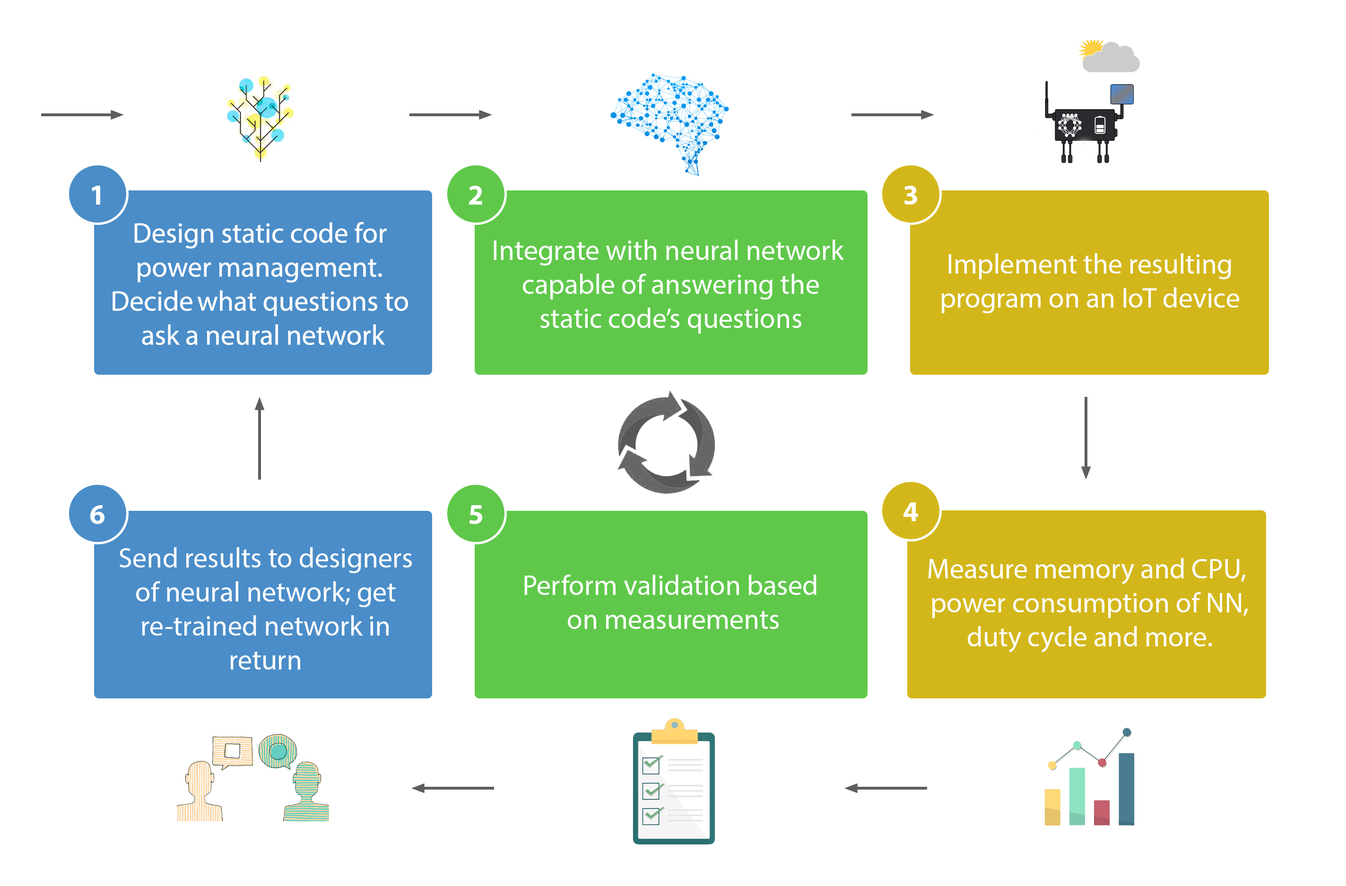
<style>
.page{position:relative;width:1346px;height:886px;background:#ffffff}
.page>*{position:absolute;margin:0}
.t1{font:28.4px "MyriadPro-Bold";color:#ffffff}
.t2{font:28.4px "MyriadPro-Regular";color:#ffffff}
</style>
<div class="page">
<p class="t1" style="left:92px;top:186px;width:8px;height:19px">1</p>
<p class="t1" style="left:469px;top:186px;width:13px;height:19px">2</p>
<p class="t1" style="left:904px;top:186px;width:13px;height:19px">3</p>
<p class="t2" style="left:112px;top:222px;width:296px;height:123px;text-align:center">Design static code for <br>power management. <br>Decide what questions to <br>ask a neural network</p>
<p class="t2" style="left:493px;top:240px;width:351px;height:94px;text-align:center">Integrate with neural network <br>capable of answering the<br>static code’s questions</p>
<p class="t2" style="left:941px;top:253px;width:298px;height:60px;text-align:center">Implement the resulting<br>program on an IoT device</p>
<p class="t1" style="left:90px;top:505px;width:14px;height:19px">6</p>
<p class="t1" style="left:469px;top:505px;width:13px;height:19px">5</p>
<p class="t1" style="left:903px;top:502px;width:15px;height:19px">4</p>
<p class="t2" style="left:120px;top:547px;width:292px;height:123px;text-align:center">Send results to designers<br>of neural network; get<br>re-trained network in<br>return</p>
<p class="t2" style="left:928px;top:558px;width:320px;height:95px;text-align:center">Measure memory and CPU, <br>power consumption of NN,<br> duty cycle and more.</p>
<p class="t2" style="left:524px;top:575px;width:292px;height:54px;text-align:center">Perform validation based <br>on measurements</p>
</div>
